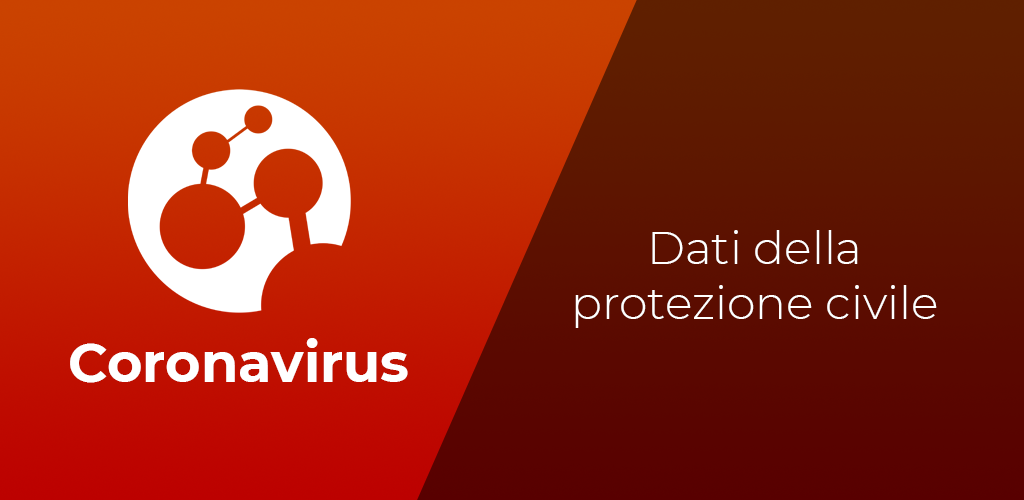
<style>
.page{position:relative;width:1024px;height:500px}
.page>*{position:absolute;margin:0}
.t1{font:45.8px "Montserrat-Light";color:#ffffff}
.t2{font:54.2px "Montserrat-Bold";color:#ffffff}
</style>
<div class="page">
<p class="t1" style="left:575px;top:230px;width:362px;height:98px;text-align:center">Dati della<br>protezione civile</p>
<p class="t2" style="left:70px;top:338px;width:338px;height:45px">Coronavirus</p>
</div>
